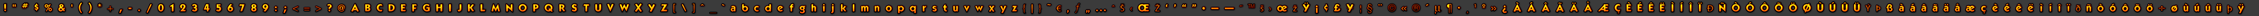
<style>
.page{position:relative;width:2259px;height:16px;background:#3b3b3b}
.page>*{position:absolute;margin:0}
.t1{font:9px "KabelBold";letter-spacing:0.6em}
.t2{font:9px "MyriadPro-Regular";letter-spacing:0.6em}
</style>
<div class="page">
<p class="t1" style="left:4px;top:2px;width:2240px;height:12px">!"#$%&amp;'()*+,-./0123456789:;&lt;=&gt;?@ABCDEFGHIJKLMNOPQRSTUVWXYZ[\]^_`abcdefghijklmnopqrstuvwxyz{|}~<span class="t2">€</span>‚ƒ„…<span class="t2">ˆŠ‹</span>Œ<span class="t2">Ž</span>‘’“”•–—<span class="t2">˜</span>™<span class="t2">š›</span>œ<span class="t2">ž</span>Ÿ¡¢£¥<span class="t2">¦</span>§¨©«®´µ¶·<span class="t2">¸¹</span>º»¿ÀÁÂÃÄÅÆÇÈÉÊËÌÍÎÏ<span class="t2">Ð</span>ÑÒÓÔÕÖØÙÚÛÜ<span class="t2">ÝÞ</span>ßàáâãäåæçèéêëìíîï<span class="t2">ð</span>ñòóôõö÷øùúûü<span class="t2">þ</span>ÿ</p>
</div>
